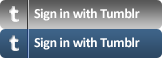
<style>
.page{position:relative;width:162px;height:58px}
.page>*{position:absolute;margin:0}
.t1{font:14px "Calibri-Bold";letter-spacing:-0.025em;color:#ffffff}
</style>
<div class="page">
<p class="t1" style="left:34px;top:8px;width:106px;height:13px">Sign in with Tumblr</p>
<p class="t1" style="left:34px;top:37px;width:106px;height:13px">Sign in with Tumblr</p>
</div>
